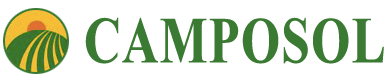
<style>
.page{position:relative;width:390px;height:77px;background:#ffffff}
.page>*{position:absolute;margin:0}
.t1{font:65.3px "TimesNewRomanPS-BoldMT";color:#3b7a33;font-weight:bold;scale:0.77 1}
</style>
<div class="page">
<p class="t1" style="left:85px;top:17px;width:299px;height:47px">CAMPOSOL</p>
</div>
